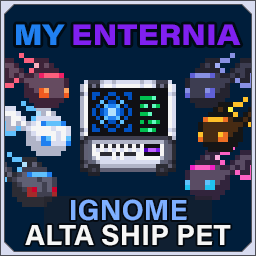
<style>
.page{position:relative;width:256px;height:256px;background:#001e3b}
.page>*{position:absolute;margin:0}
.t1{font:29.2px "AcuminConcept_760.000wght_112.000wdth";color:#8020f0}
.t2{font:29.2px "AcuminConcept_760.000wght_112.000wdth";color:#2080f0}
.t3{font:29.2px/25px "AcuminConcept-Bold";color:#f6f6f6}
.t4{font:29.2px/25px "AcuminConcept-Bold";color:#7eafff}
</style>
<div class="page">
<p class="t1" style="left:16px;top:24px;width:225px;height:21px"><span class="t2">MY </span>ENTERNIA</p>
<p class="t3" style="left:25px;top:199px;width:206px;height:47px;text-align:center"><span class="t4">IGNOME<br></span>ALTA SHIP PET</p>
</div>
